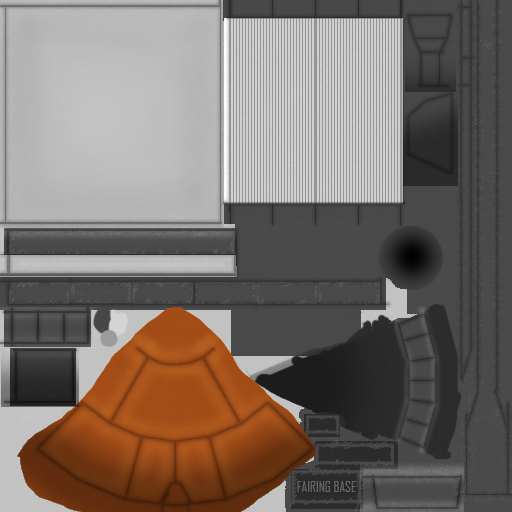
<style>
.page{position:relative;width:512px;height:512px}
.page>*{position:absolute;margin:0}
.t1{font:14px "AgencyFB-Reg";color:#827f7f}
</style>
<div class="page">
<p class="t1" style="left:297px;top:481px;width:59px;height:11px;opacity:0.64">FAIRING BASE</p>
</div>
